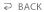
<style>
.page{position:relative;width:44px;height:12px;background:#ffffff}
.page>*{position:absolute;margin:0}
.t1{font:10px "MyriadPro-Regular";letter-spacing:0.025em;color:#787576}
</style>
<div class="page">
<p class="t1" style="left:18px;top:3px;width:24px;height:7px">BACK</p>
</div>
